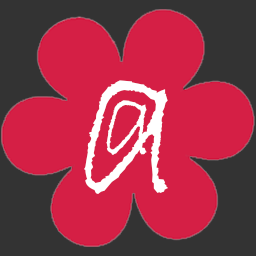
<style>
.page{position:relative;width:256px;height:256px;background:#d51f45}
.page>*{position:absolute;margin:0}
.t1{font:232.6px "BradleyHandITC";color:#ffffff}
.t2{font:111.6px "BradleyHandITC";color:#ffffff}
</style>
<div class="page">
<p class="t1" style="left:84px;top:80px;width:84px;height:114px">a</p>
<p class="t2" style="left:106px;top:100px;width:41px;height:55px">a</p>
</div>
